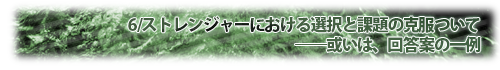
<style>
.page{position:relative;width:500px;height:70px}
.page>*{position:absolute;margin:0}
.t1{font:16.8px "KozGoPr6N-Heavy";letter-spacing:-0.075em;color:#416040}
</style>
<div class="page">
<p class="t1" style="left:128px;top:16px;width:353px;height:37px;text-align:right">6/ストレンジャーにおける選択と課題の克服ついて<br>――或いは、回答案の一例</p>
</div>
